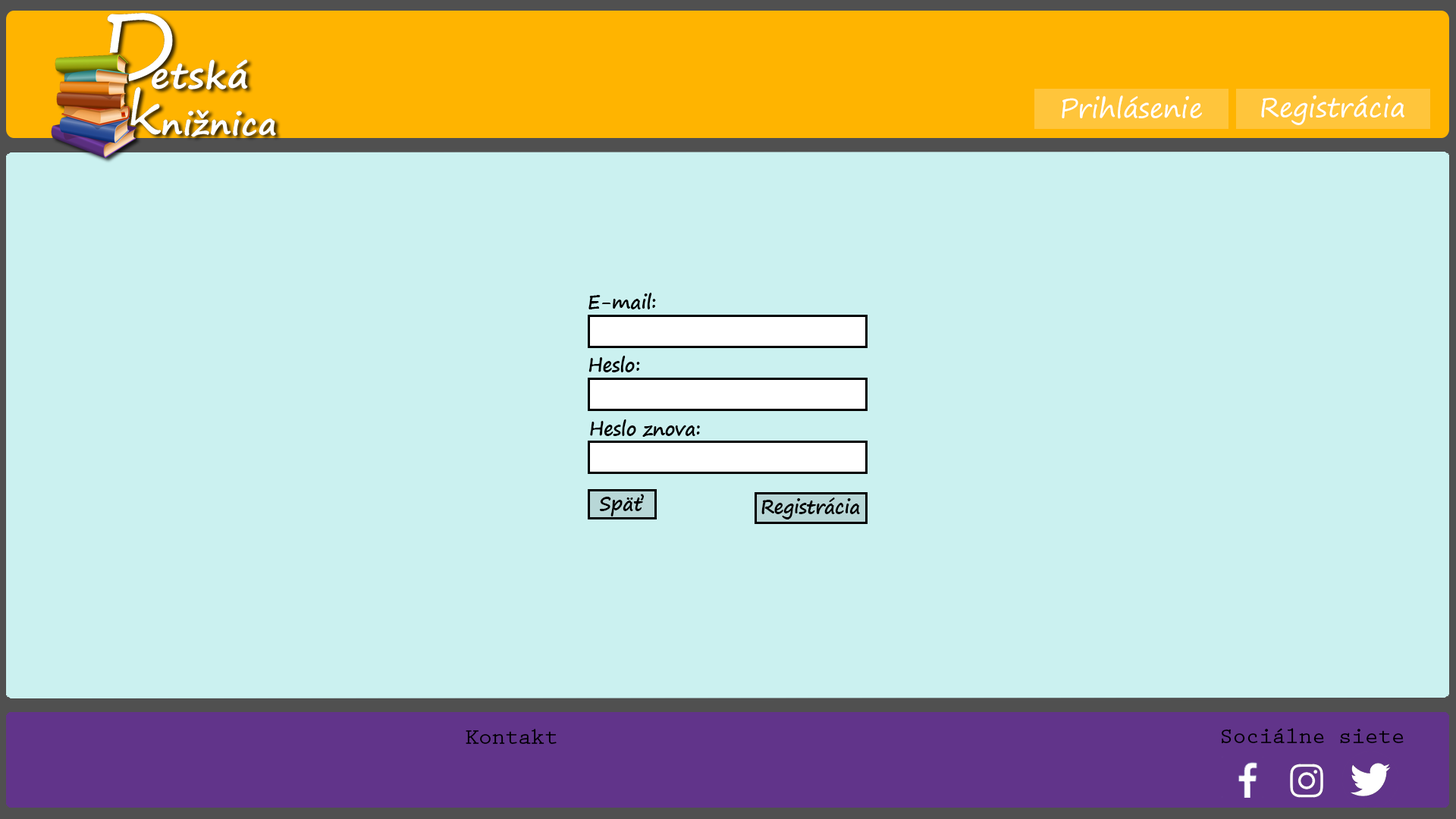
<style>
.page{position:relative;width:1456px;height:819px;background:#cbf1f0}
.page>*{position:absolute;margin:0}
.t1{font:26.5px "SegoePrint";color:#ffffff}
.t2{font:19px "SegoePrint-Bold";letter-spacing:-0.02em;color:#000000}
.t3{font:22.7px "PrestigeEliteStd-Bd";letter-spacing:-0.02em;color:#000000}
</style>
<div class="page">
<p class="t1" style="left:1062px;top:96px;width:140px;height:23px">Prihlásenie</p>
<p class="t1" style="left:1261px;top:95px;width:143px;height:30px">Registrácia</p>
<p class="t2" style="left:588px;top:293px;width:68px;height:16px">E-mail:</p>
<p class="t2" style="left:588px;top:356px;width:52px;height:16px">Heslo:</p>
<p class="t2" style="left:590px;top:419px;width:110px;height:18px">Heslo znova:</p>
<p class="t2" style="left:599px;top:494px;width:45px;height:22px">Späť</p>
<p class="t2" style="left:761px;top:497px;width:99px;height:22px">Registrácia</p>
<p class="t3" style="left:466px;top:729px;width:91px;height:15px">Kontakt</p>
<p class="t3" style="left:1221px;top:728px;width:183px;height:15px">Sociálne siete</p>
</div>
